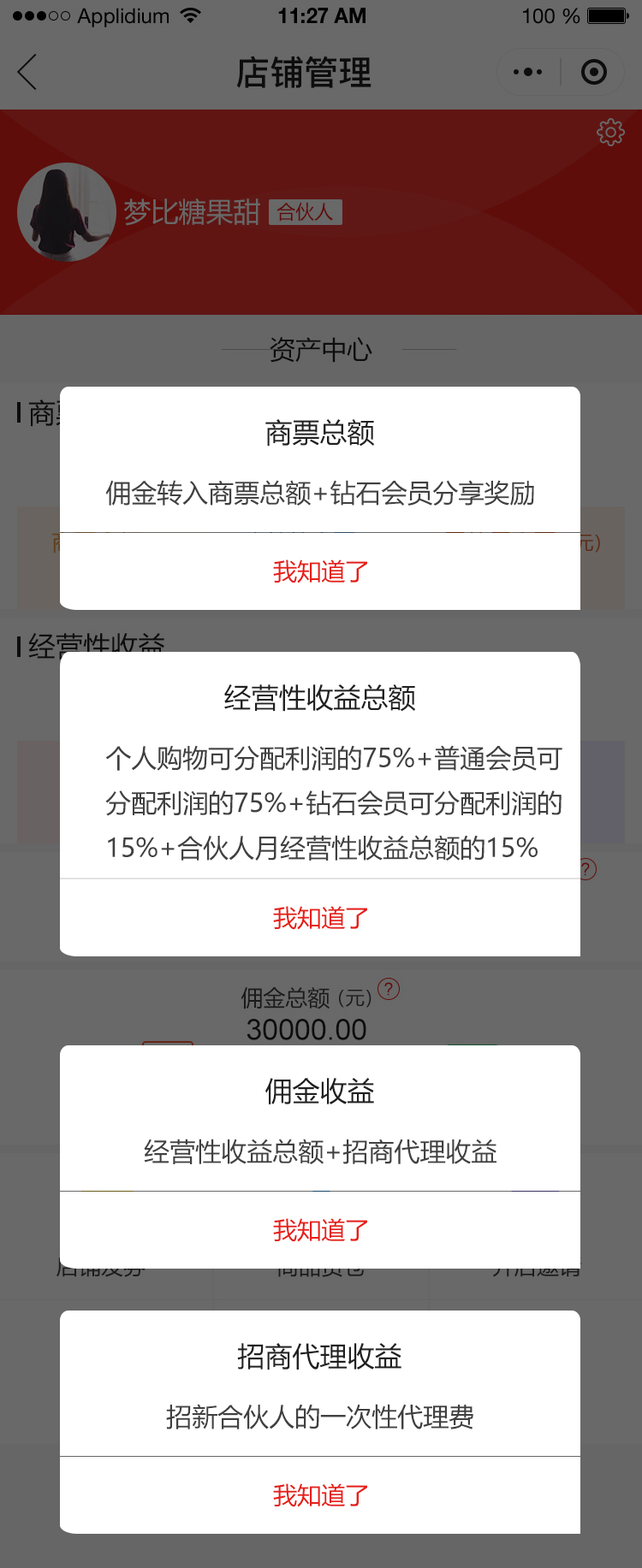
<style>
.page{position:relative;width:642px;height:1568px;background:#ffffff}
.page>*{position:absolute;margin:0}
.t1{font:27.4px "MicrosoftYaHei";color:#202020;text-transform:uppercase}
.t2{font:25.7px "MicrosoftYaHei";color:#404040;text-transform:uppercase}
.t3{font:24px "MicrosoftYaHei";color:#e61f18;text-transform:uppercase}
</style>
<div class="page">
<p class="t1" style="left:265px;top:419px;width:110px;height:28px">商票总额</p>
<p class="t2" style="left:105px;top:480px;width:429px;height:26px">佣金转入商票总额+钻石会员分享奖励</p>
<p class="t3" style="left:273px;top:559px;width:94px;height:24px">我知道了</p>
<p class="t1" style="left:224px;top:684px;width:192px;height:28px">经营性收益总额</p>
<p class="t2" style="left:105px;top:745px;width:457px;height:116px">个人购物可分配利润的75%+普通会员可<br>分配利润的75%+钻石会员可分配利润的<br>15%+合伙人月经营性收益总额的15%</p>
<p class="t3" style="left:273px;top:906px;width:94px;height:24px">我知道了</p>
<p class="t1" style="left:265px;top:1078px;width:109px;height:26px">佣金收益</p>
<p class="t2" style="left:144px;top:1139px;width:352px;height:25px">经营性收益总额+招商代理收益</p>
<p class="t3" style="left:273px;top:1218px;width:94px;height:24px">我知道了</p>
<p class="t1" style="left:237px;top:1343px;width:164px;height:27px">招商代理收益</p>
<p class="t2" style="left:166px;top:1404px;width:307px;height:25px">招新合伙人的一次性代理费</p>
<p class="t3" style="left:273px;top:1483px;width:94px;height:24px">我知道了</p>
</div>
